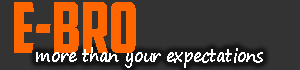
<style>
.page{position:relative;width:300px;height:70px;background:#333333}
.page>*{position:absolute;margin:0}
.t1{font:70px "AmericanCaptain";color:#ff6600;scale:0.93 1}
.t2{font:18px "SegoePrint-Bold";color:#ffffff;scale:0.87 1}
</style>
<div class="page">
<p class="t1" style="left:14px;top:2px;width:122px;height:51px">E-Bro</p>
<p class="t2" style="left:36px;top:47px;width:227px;height:21px">more than your expectations</p>
</div>
